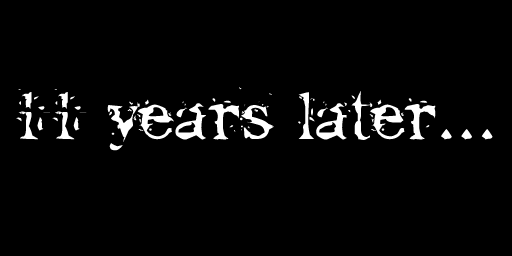
<style>
.page{position:relative;width:512px;height:256px;background:#000000}
.page>*{position:absolute;margin:0}
.t1{font:72px "GoodbyeCruelWorld";color:#ffffff;scale:0.9 1}
</style>
<div class="page">
<p class="t1" style="left:16px;top:87px;width:477px;height:64px">11 years later...</p>
</div>
